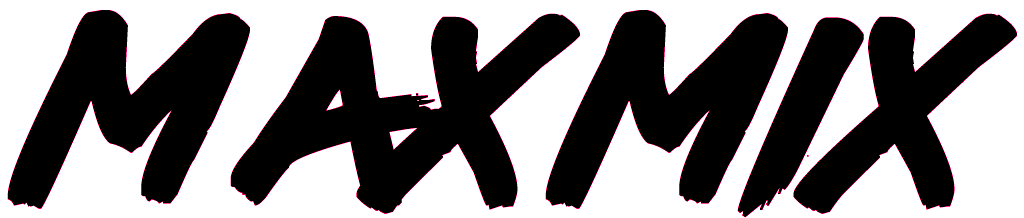
<style>
.page{position:relative;width:1024px;height:218px;background:#ffffff}
.page>*{position:absolute;margin:0}
.t1{font:235.1px "lazer84";color:#000000}
</style>
<div class="page">
<p class="t1" style="left:7px;top:10px;width:1011px;height:208px">maxmix</p>
</div>
